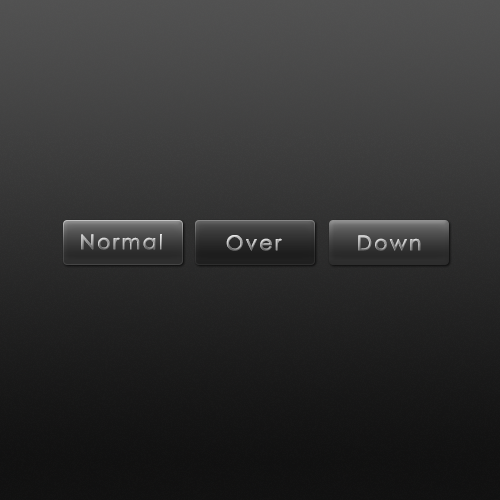
<style>
.page{position:relative;width:500px;height:500px}
.page>*{position:absolute;margin:0}
.t1{font:20px "CenturyGothic";letter-spacing:0.1em;font-weight:bold}
</style>
<div class="page">
<p class="t1" style="left:81px;top:234px;width:81px;height:16px">Normal</p>
<p class="t1" style="left:226px;top:235px;width:56px;height:16px">Over</p>
<p class="t1" style="left:358px;top:235px;width:63px;height:16px">Down</p>
</div>
